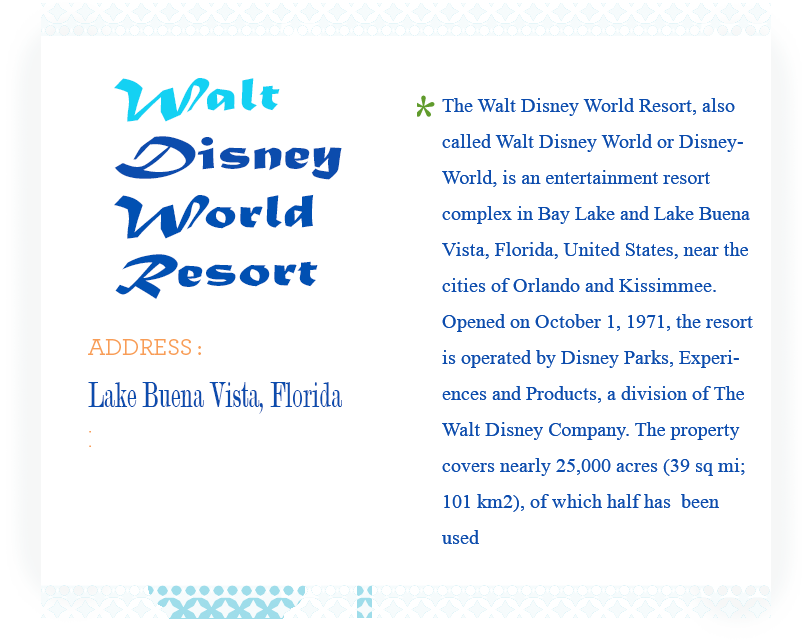
<style>
.page{position:relative;width:810px;height:642px;background:#ffffff}
.page>*{position:absolute;margin:0}
.t1{font:30px "Microsoft-Himalaya";color:#0c4cad}
</style>
<div class="page">
<p class="t1" style="left:442px;top:98px;width:311px;height:446px">The Walt Disney World Resort, also called Walt Disney World or DisneyWorld, is an entertainment resort complex in Bay Lake and Lake Buena Vista, Florida, United States, near the cities of Orlando and Kissimmee. Opened on October 1, 1971, the resort is operated by Disney Parks, Experiences and Products, a division of The Walt Disney Company. The property covers nearly 25,000 acres (39 sq mi; 101 km2), of which half has  been used</p>
</div>
